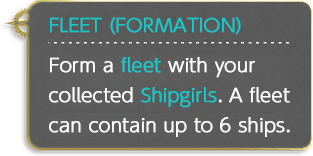
<style>
.page{position:relative;width:313px;height:156px}
.page>*{position:absolute;margin:0}
.t1{font:18px/30px "UDShinGoPro-Light";color:#ffffff;font-weight:bold}
.t2{font:18px/40px "UDShinGoPro-Light";color:#14c9cb;font-weight:bold}
.t3{font:18px/40px "UDShinGoPro-Light";color:#ffffff;font-weight:bold}
.t4{font:18px/30px "UDShinGoPro-Light";color:#14c9cb;font-weight:bold}
</style>
<div class="page">
<p class="t1" style="left:49px;top:17px;width:241px;height:120px"><span class="t2">FLEET (FORMATION)<br></span><span class="t3">Form a </span><span class="t2">fleet</span><span class="t3"> with your<br></span>collected <span class="t4">Shipgirls</span>. A fleet<br>can contain up to 6 ships.</p>
</div>
